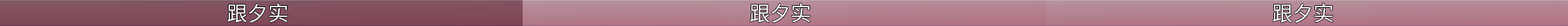
<style>
.page{position:relative;width:1568px;height:26px}
.page>*{position:absolute;margin:0}
.t1{font:20.6px "SourceHanSansSC-Normal";color:#ffffff}
</style>
<div class="page">
<p class="t1" style="left:227px;top:3px;width:60px;height:20px">跟夕实</p>
<p class="t1" style="left:750px;top:3px;width:60px;height:20px">跟夕实</p>
<p class="t1" style="left:1273px;top:3px;width:60px;height:20px">跟夕实</p>
</div>
